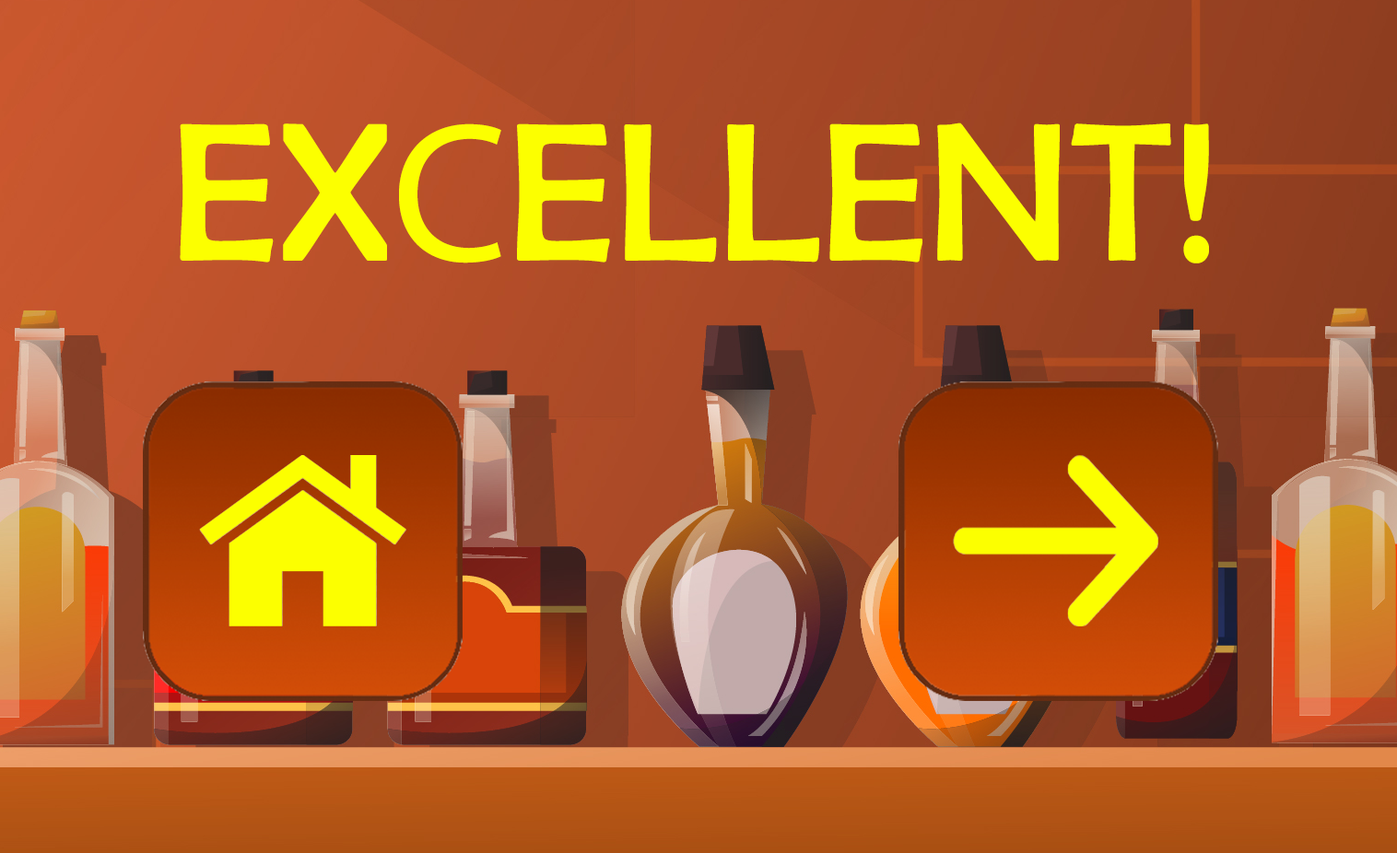
<style>
.page{position:relative;width:1397px;height:853px}
.page>*{position:absolute;margin:0}
.t1{font:199.1px "BerlinSansFB-Reg";color:#fcff00}
.t2{font:199.1px "MyriadPro-Regular";color:#fcff00}
</style>
<div class="page">
<p class="t1" style="left:180px;top:123px;width:1029px;height:141px">EX<span class="t2">С</span>ELLENT!</p>
</div>
